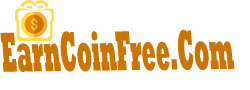
<style>
.page{position:relative;width:250px;height:90px;background:#ffffff}
.page>*{position:absolute;margin:0}
.t1{font:57px "Rockwell-ExtraBold";color:#cc7400;scale:0.36 1}
</style>
<div class="page">
<p class="t1" style="left:0px;top:29px;width:235px;height:43px;rotate:-1deg">EarnCoinFree.Com</p>
</div>
